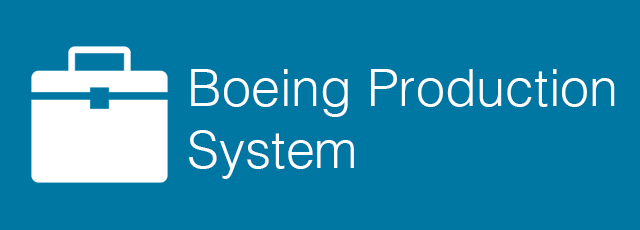
<style>
.page{position:relative;width:640px;height:230px;background:#0076a3}
.page>*{position:absolute;margin:0}
.t1{font:52px "Helvetica-Light";color:#fefefe}
</style>
<div class="page">
<p class="t1" style="left:189px;top:69px;width:426px;height:110px">Boeing Production<br>System</p>
</div>
